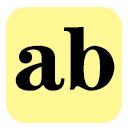
<style>
.page{position:relative;width:128px;height:128px;background:#fff895}
.page>*{position:absolute;margin:0}
.t1{font:91.7px "FZCHSJW--GB1-0";color:#000000}
</style>
<div class="page">
<p class="t1" style="left:64px;top:27px;width:51px;height:64px">b</p>
<p class="t1" style="left:15px;top:45px;width:50px;height:46px">a</p>
</div>
